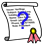
<style>
.page{position:relative;width:44px;height:44px;background:#ffffff}
.page>*{position:absolute;margin:0}
.t1{font:24px "ArialMT";color:#170cf2}
</style>
<div class="page">
<p class="t1" style="left:17px;top:11px;width:12px;height:18px">?</p>
</div>
